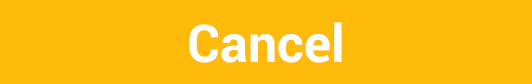
<style>
.page{position:relative;width:532px;height:84px;background:#ffbb0b}
.page>*{position:absolute;margin:0}
.t1{font:52.1px "Roboto-Bold";color:#ffffff}
</style>
<div class="page">
<p class="t1" style="left:189px;top:22px;width:153px;height:41px">Cancel</p>
</div>
